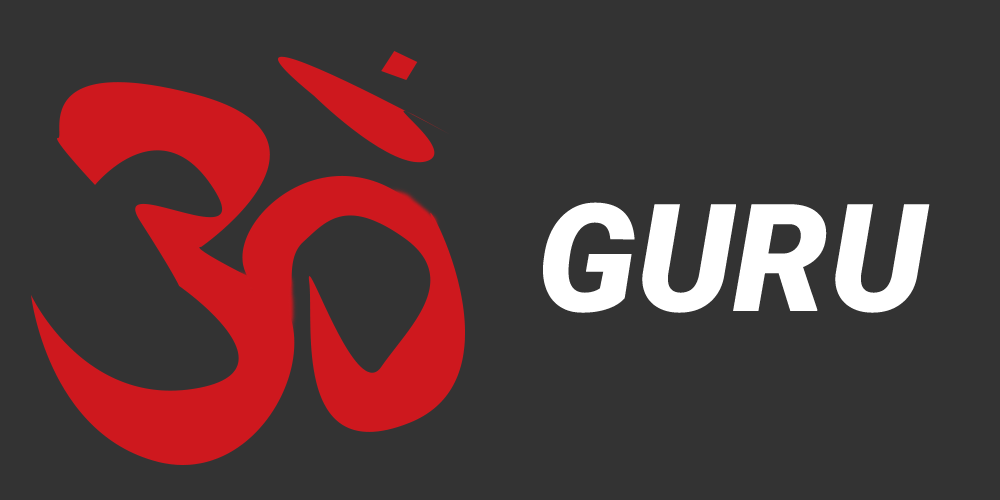
<style>
.page{position:relative;width:1000px;height:500px;background:#333333}
.page>*{position:absolute;margin:0}
.t1{font:150px "Roboto-BlackItalic";color:#ffffff}
</style>
<div class="page">
<p class="t1" style="left:543px;top:202px;width:387px;height:111px">GURU</p>
</div>
